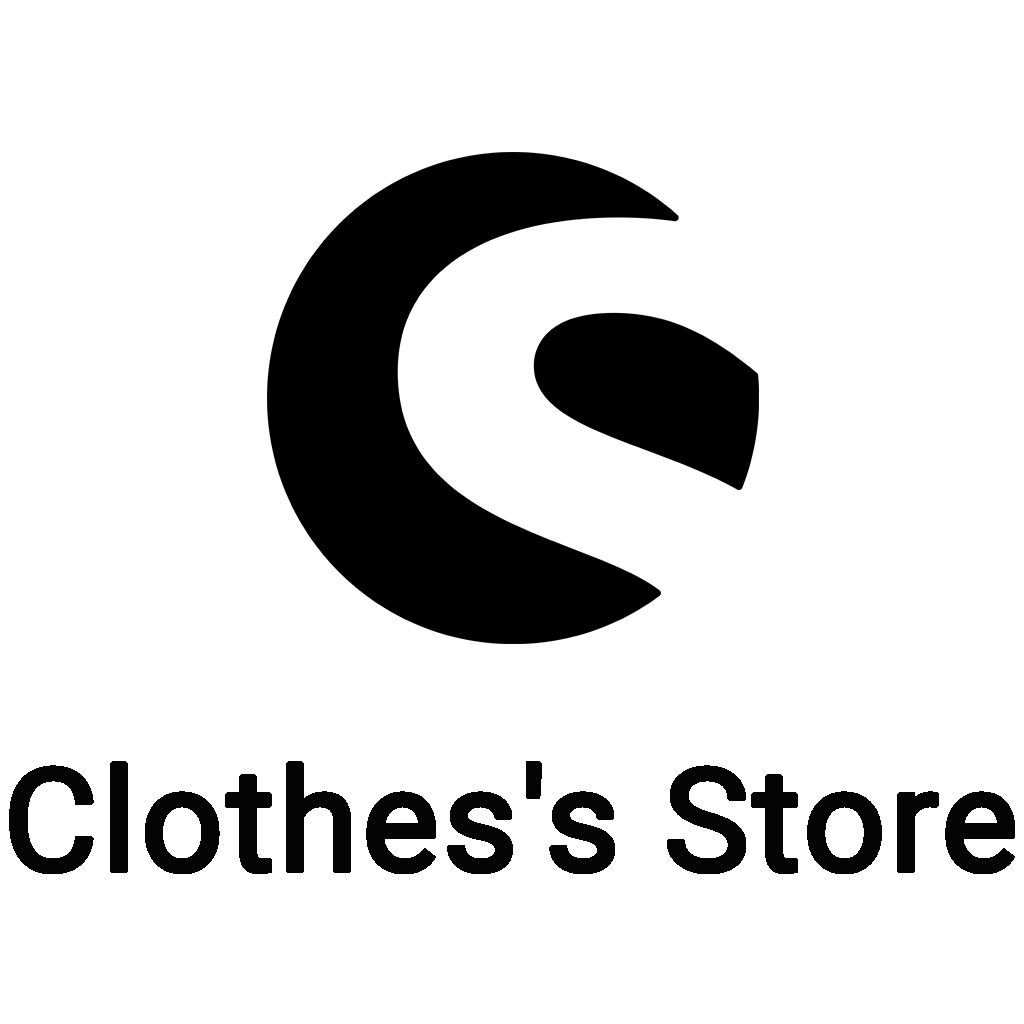
<style>
.page{position:relative;width:1024px;height:1024px;background:#ffffff}
.page>*{position:absolute;margin:0}
.t1{font:143.5px "Roboto-Regular";color:#040404;font-weight:bold}
</style>
<div class="page">
<p class="t1" style="left:9px;top:761px;width:1006px;height:113px">Clothes's Store</p>
</div>
